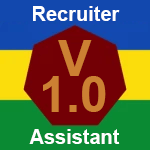
<style>
.page{position:relative;width:150px;height:150px}
.page>*{position:absolute;margin:0}
.t1{font:20px "Arial-BoldMT";color:#ffffff}
.t2{font:50px "Arial-BoldMT";color:#cc8033}
</style>
<div class="page">
<p class="t1" style="left:33px;top:6px;width:87px;height:15px">Recruiter</p>
<p class="t2" style="left:58px;top:40px;width:34px;height:36px">V</p>
<p class="t2" style="left:43px;top:76px;width:63px;height:36px">1.0</p>
<p class="t1" style="left:29px;top:129px;width:91px;height:15px">Assistant</p>
</div>
